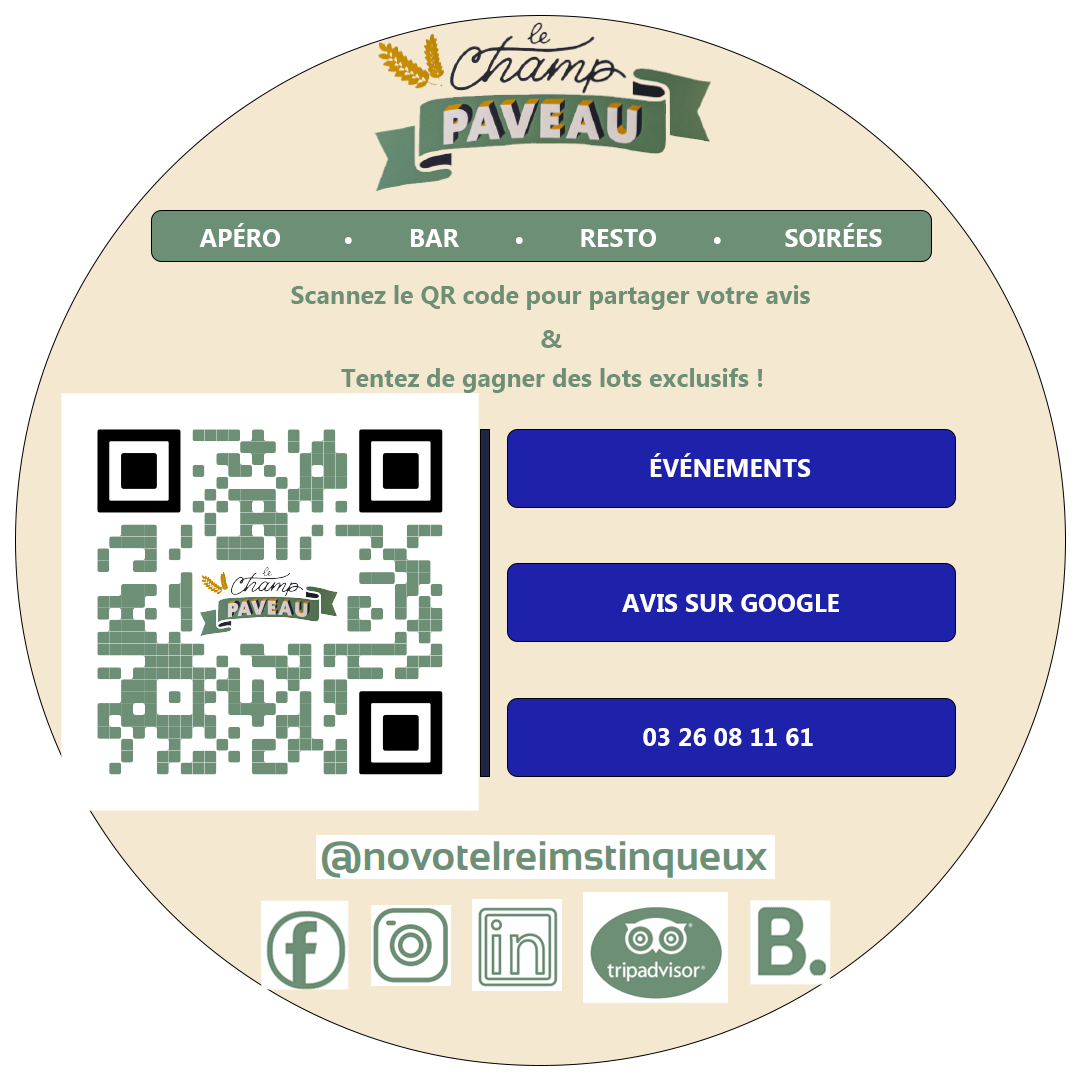
<style>
.page{position:relative;width:1080px;height:1080px;background:#ffffff}
.page>*{position:absolute;margin:0}
.t1{font:25px "MicrosoftNewTaiLue-Bold";color:#ffffff}
.t2{font:25px "MicrosoftNewTaiLue-Bold";color:#6d8f75}
</style>
<div class="page">
<p class="t1" style="left:199px;top:223px;width:683px;height:24px">APÉRO         •        BAR        •        RESTO        •         SOIRÉES</p>
<p class="t2" style="left:291px;top:285px;width:519px;height:25px">Scannez le QR code pour partager votre avis</p>
<p class="t2" style="left:541px;top:330px;width:21px;height:18px">&amp;</p>
<p class="t2" style="left:341px;top:368px;width:422px;height:25px">Tentez de gagner des lots exclusifs !</p>
<p class="t1" style="left:650px;top:453px;width:161px;height:24px">ÉVÉNEMENTS</p>
<p class="t1" style="left:622px;top:594px;width:217px;height:18px">AVIS SUR GOOGLE</p>
<p class="t1" style="left:643px;top:728px;width:170px;height:18px">03 26 08 11 61</p>
</div>
